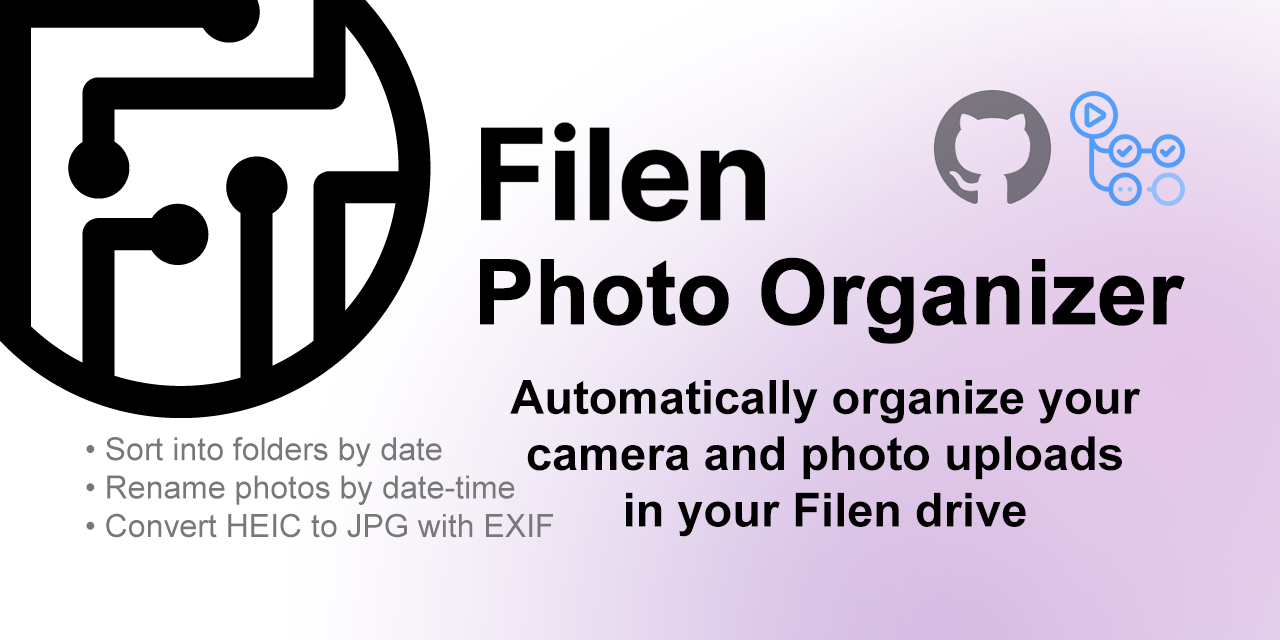
<style>
.page{position:relative;width:1280px;height:640px;background:#ffffff}
.page>*{position:absolute;margin:0}
.t1{font:90px "Arial-BoldMT";letter-spacing:-0.02em;color:#000000;font-weight:bold}
.t2{font:47px "Arial-BoldMT";color:#000000}
.t3{font:32px "ArialMT";color:#787878}
</style>
<div class="page">
<p class="t1" style="left:480px;top:257px;width:705px;height:87px">Photo Organizer</p>
<p class="t2" style="left:510px;top:380px;width:631px;height:157px;text-align:center">Automatically organize your camera and photo uploads in your Filen drive</p>
<p class="t3" style="left:86px;top:437px;width:467px;height:101px">• Sort into folders by date<br>• Rename photos by date-time<br>• Convert HEIC to JPG with EXIF</p>
</div>
